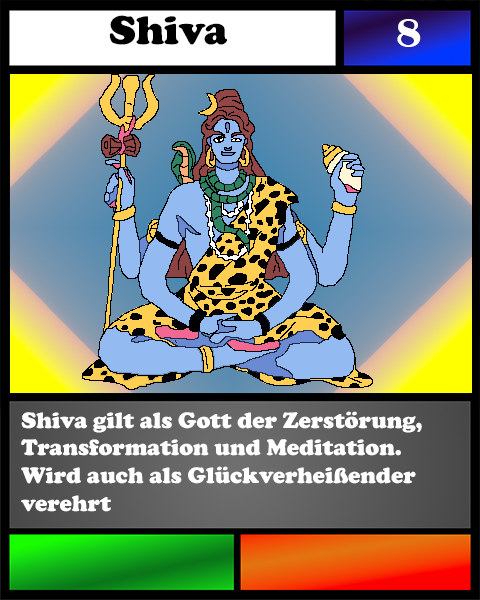
<style>
.page{position:relative;width:480px;height:600px}
.page>*{position:absolute;margin:0}
.t1{font:41.7px "CooperBlack";color:#000000}
.t2{font:41.7px "BritannicBold";color:#ffffff}
.t3{font:23.1px "CooperBlack";color:#ffffff}
</style>
<div class="page">
<p class="t1" style="left:109px;top:15px;width:118px;height:30px">Shiva</p>
<p class="t2" style="left:397px;top:19px;width:24px;height:28px">8</p>
<p class="t3" style="left:21px;top:411px;width:401px;height:101px">Shiva gilt als Gott der Zerstörung,<br>Transformation und Meditation. <br>Wird auch als Glückverheißender<br>verehrt</p>
</div>
